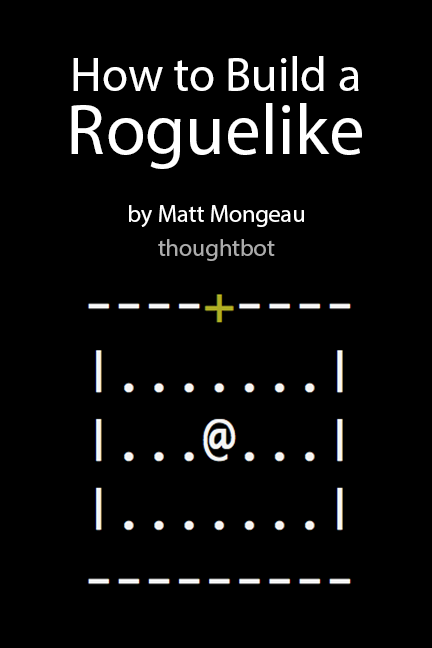
<style>
.page{position:relative;width:432px;height:648px;background:#000000}
.page>*{position:absolute;margin:0}
.t1{font:48px/63px "KozGoPr6N-Regular";color:#ffffff}
.t2{font:72px/63px "KozGoPr6N-Regular";color:#ffffff}
.t3{font:24px "KozGoPr6N-Regular";color:#ffffff}
.t4{font:24px "KozGoPr6N-Regular";color:#acacac}
</style>
<div class="page">
<p class="t1" style="left:71px;top:56px;width:291px;height:113px;text-align:center">How to Build a <br><span class="t2">Roguelike</span></p>
<p class="t3" style="left:129px;top:205px;width:175px;height:22px">by Matt Mongeau</p>
<p class="t4" style="left:158px;top:239px;width:117px;height:22px">thoughtbot</p>
</div>
